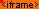
<style>
.page{position:relative;width:39px;height:9px;background:#fc6f00}
.page>*{position:absolute;margin:0}
.t1{font:9px "ArialMT";letter-spacing:0.05em;color:#000000}
</style>
<div class="page">
<p class="t1" style="left:2px;top:1px;width:36px;height:7px">&lt;iframe&gt;</p>
</div>
